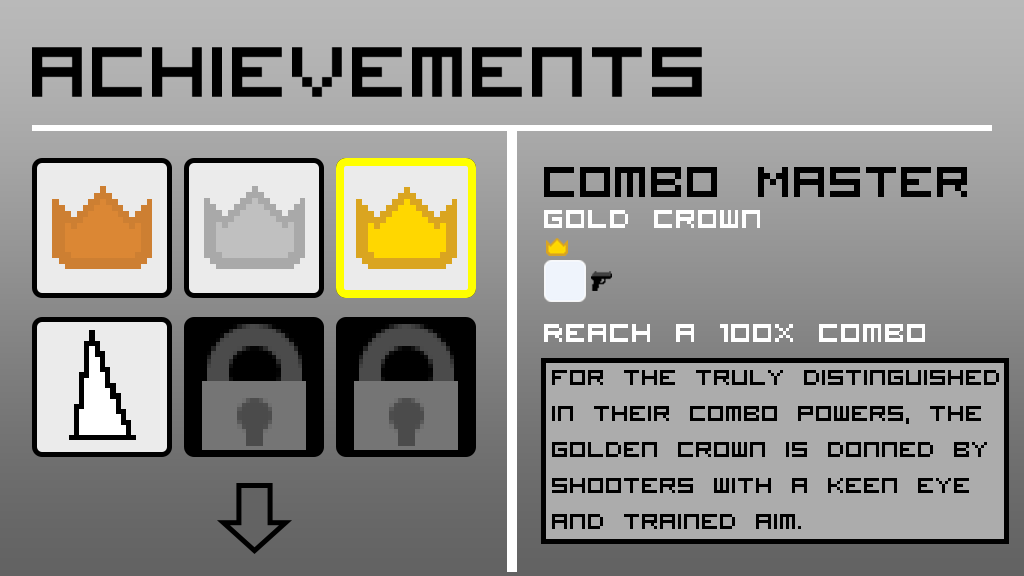
<style>
.page{position:relative;width:1024px;height:576px}
.page>*{position:absolute;margin:0}
.t1{font:60px "VisitorTT1BRK";color:#000000}
.t2{font:36px "VisitorTT1BRK";color:#ffffff}
.t3{font:30px "VisitorTT1BRK";color:#000000}
</style>
<div class="page">
<p class="t1" style="left:544px;top:167px;width:423px;height:30px">Combo Master</p>
<p class="t2" style="left:544px;top:210px;width:216px;height:18px">Gold Crown</p>
<p class="t2" style="left:544px;top:324px;width:381px;height:18px">Reach a 100x combo</p>
<p class="t3" style="left:552px;top:370px;width:447px;height:159px">For the truly distinguished in their combo powers, the golden crown is donned by shooters with a keen eye and trained aim.</p>
</div>
